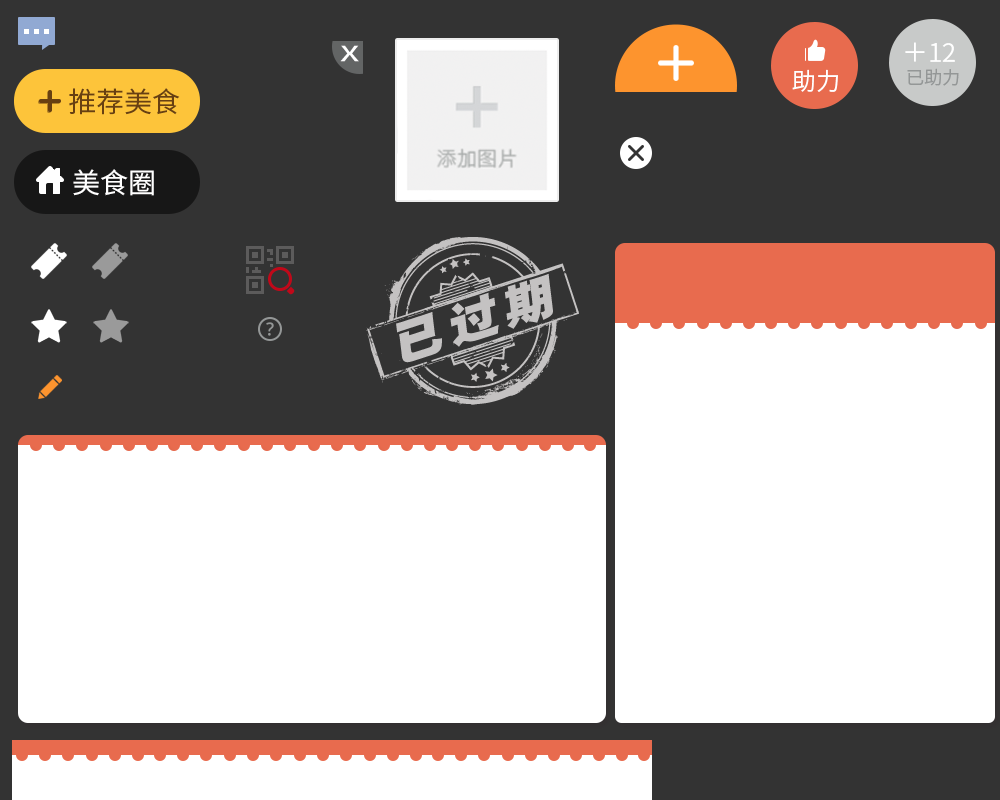
<style>
.page{position:relative;width:1000px;height:800px;background:#ffffff}
.page>*{position:absolute;margin:0}
.t1{font:26.8px "FZLTZHK--GBK1-0";letter-spacing:0.08em;color:#ffffff;scale:1.09 1}
.t2{font:26px "SourceHanSansSC-Normal";color:#ffffff}
.t3{font:24px "SourceHanSansSC-Normal";color:#ffffff}
.t4{font:18px "SourceHanSansSC-Normal";color:#949797}
.t5{font:28px "SourceHanSansSC-Normal";color:#684011}
.t6{font:28px "SourceHanSansSC-Normal";color:#ffffff}
.t7{font:47px "HYb0gj";letter-spacing:0.1em;color:#c4c2c2;font-style:italic;scale:1.11 1}
</style>
<div class="page">
<p class="t1" style="left:340px;top:45px;width:19px;height:17px">x</p>
<p class="t2" style="left:905px;top:42px;width:50px;height:20px">＋12</p>
<p class="t3" style="left:792px;top:69px;width:46px;height:23px">助力</p>
<p class="t4" style="left:907px;top:68px;width:52px;height:18px">已助力</p>
<p class="t5" style="left:69px;top:88px;width:111px;height:27px">推荐美食</p>
<p class="t6" style="left:73px;top:169px;width:81px;height:27px">美食圈</p>
<p class="t7" style="left:396px;top:273px;width:157px;height:90px;rotate:-18deg">已过期</p>
</div>
